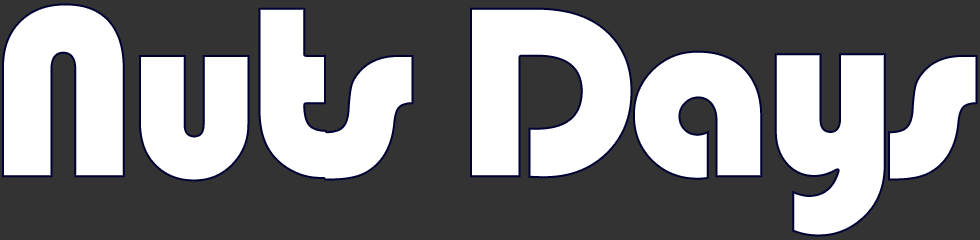
<style>
.page{position:relative;width:980px;height:240px;background:#333333}
.page>*{position:absolute;margin:0}
.t1{font:254px "Bauhaus93";letter-spacing:-0.05em;color:#ffffff}
</style>
<div class="page">
<p class="t1" style="left:2px;top:3px;width:976px;height:234px">Nuts Days</p>
</div>
